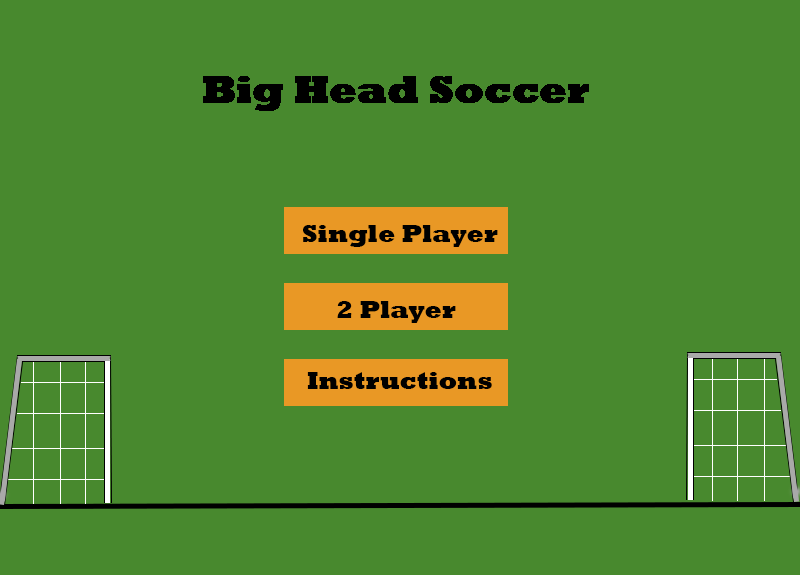
<style>
.page{position:relative;width:800px;height:575px;background:#48892e}
.page>*{position:absolute;margin:0}
.t1{font:25px "Rockwell-ExtraBold";color:#000000}
</style>
<div class="page">
<p class="t1" style="left:303px;top:225px;width:195px;height:22px">Single Player</p>
<p class="t1" style="left:337px;top:301px;width:119px;height:22px">2 Player</p>
<p class="t1" style="left:307px;top:372px;width:185px;height:17px">Instructions</p>
</div>
